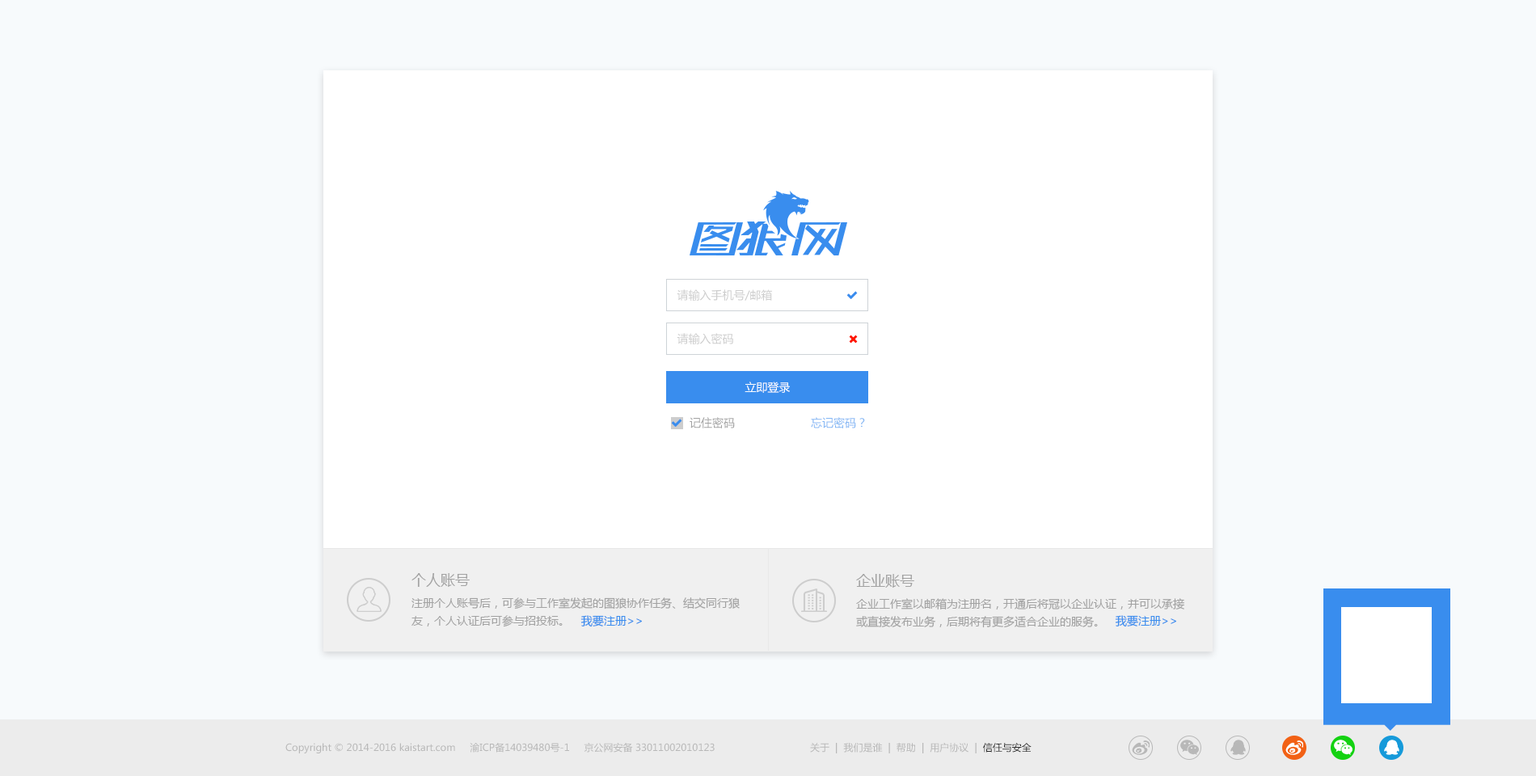
<style>
.page{position:relative;width:1536px;height:776px;background:#f7fafc}
.page>*{position:absolute;margin:0}
.t1{font:11.3px "MicrosoftYaHei";color:#cdcdcd}
.t2{font:11.3px "MicrosoftYaHei";color:#ffffff}
.t3{font:11.3px "MicrosoftYaHei";color:#a2a2a2}
.t4{font:11.3px "MicrosoftYaHei";color:#82b6f4}
.t5{font:14.6px "MicrosoftYaHei";color:#a2a2a2;text-transform:uppercase}
.t6{font:11.3px/17.8px "MicrosoftYaHei";color:#a2a2a2;text-transform:uppercase}
.t7{font:11.3px "MicrosoftYaHei";color:#398dee;text-transform:uppercase}
.t8{font:9.7px "MicrosoftYaHei";color:#b8b8b8}
.t9{font:9.7px "MicrosoftYaHei";color:#282828}
</style>
<div class="page">
<p class="t1" style="left:677px;top:289px;width:95px;height:12px">请输入手机号/邮箱</p>
<p class="t1" style="left:677px;top:333px;width:56px;height:11px">请输入密码</p>
<p class="t2" style="left:745px;top:382px;width:45px;height:11px">立即登录</p>
<p class="t3" style="left:690px;top:417px;width:45px;height:12px">记住密码</p>
<p class="t4" style="left:811px;top:417px;width:54px;height:12px">忘记密码？</p>
<p class="t5" style="left:412px;top:573px;width:58px;height:14px">个人账号</p>
<p class="t5" style="left:856px;top:574px;width:58px;height:14px">企业账号</p>
<p class="t6" style="left:412px;top:598px;width:328px;height:29px">注册个人账号后，可参与工作室发起的图狼协作任务、结交同行狼<br>友，个人认证后可参与招投标。</p>
<p class="t6" style="left:856px;top:598px;width:329px;height:30px">企业工作室以邮箱为注册名，开通后将冠以企业认证，并可以承接<br>或直接发布业务，后期将有更多适合企业的服务。</p>
<p class="t7" style="left:581px;top:615px;width:61px;height:12px">我要注册&gt;&gt;</p>
<p class="t7" style="left:1115px;top:615px;width:61px;height:12px">我要注册&gt;&gt;</p>
<p class="t8" style="left:285px;top:743px;width:430px;height:11px">Copyright © 2014-2016 kaistart.com     渝ICP备14039480号-1     京公网安备 33011002010123</p>
<p class="t8" style="left:810px;top:743px;width:222px;height:11px">关于  |  我们是谁  |  帮助  |  用户协议  |  <span class="t9">信任与安全</span></p>
</div>
